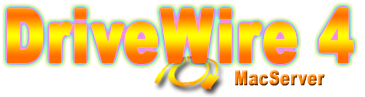
<style>
.page{position:relative;width:365px;height:97px;background:#ffffff}
.page>*{position:absolute;margin:0}
.t1{font:75px "Arial-Black";letter-spacing:0.01em;font-weight:bold;scale:0.7 1}
.t2{font:20.8px "Arial-Black";letter-spacing:0.01em;font-weight:bold;scale:0.7 1}
</style>
<div class="page">
<p class="t1" style="left:7px;top:7px;width:347px;height:57px">DriveWire 4</p>
<p class="t2" style="left:235px;top:70px;width:90px;height:16px">MacServer</p>
</div>
